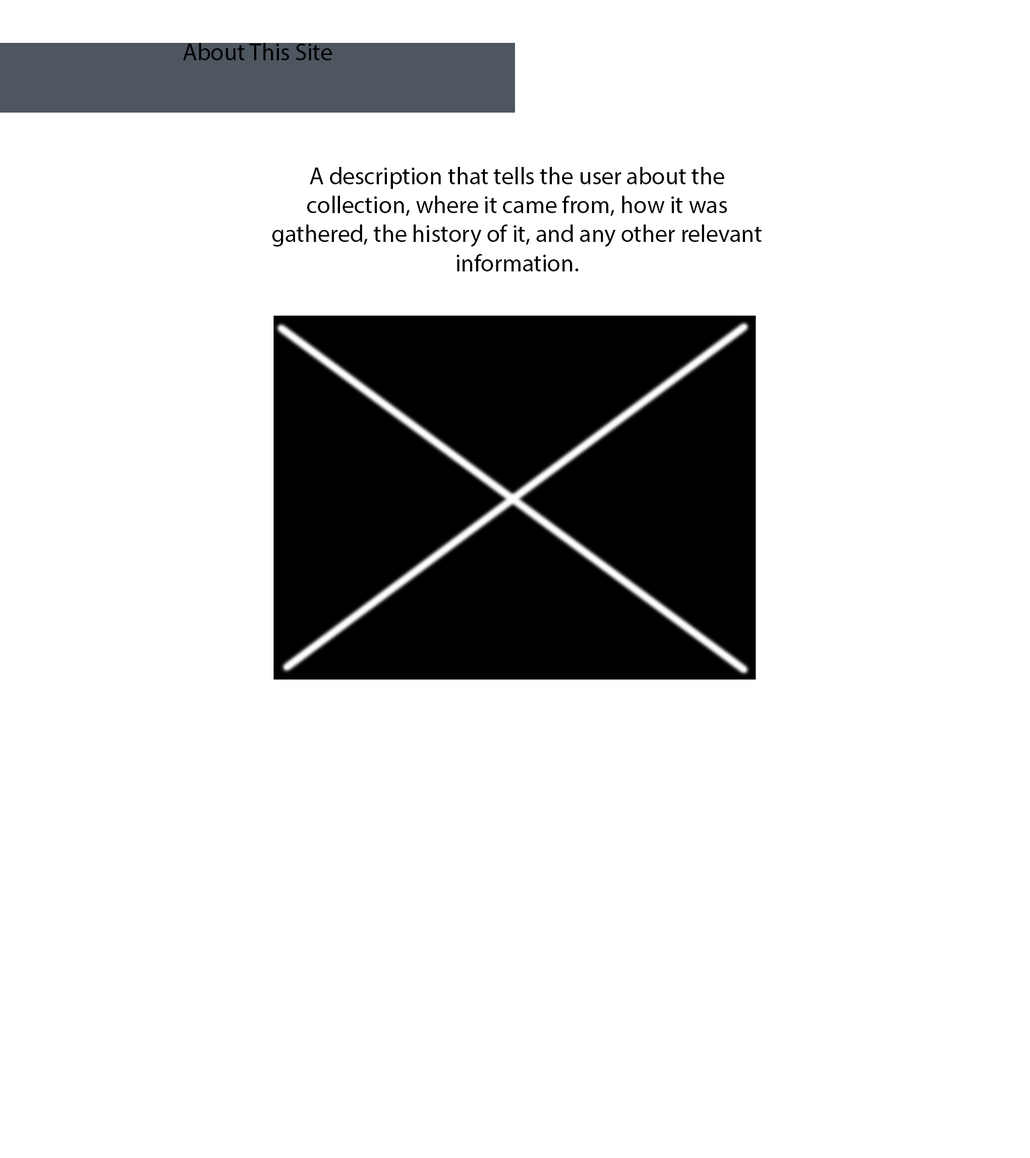
<style>
.page{position:relative;width:1030px;height:1158px;background:#ffffff}
.page>*{position:absolute;margin:0}
.t1{font:24.1px "MyriadPro-Regular";color:#000000}
</style>
<div class="page">
<p class="t1" style="left:183px;top:43px;width:149px;height:17px">About This Site</p>
<p class="t1" style="left:272px;top:167px;width:489px;height:104px;text-align:center">A description that tells the user about the collection, where it came from, how it was gathered, the history of it, and any other relevant information.</p>
</div>
